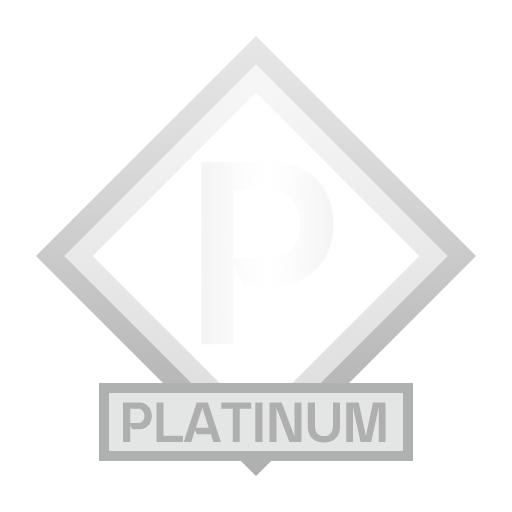
<style>
.page{position:relative;width:512px;height:512px;background:#ffffff}
.page>*{position:absolute;margin:0}
.t1{font:231.8px "yspotlight-regular";color:#f9f9f9}
.t2{font:50px "yspotlight-regular";color:#afafaf}
</style>
<div class="page">
<p class="t1" style="left:201px;top:162px;width:133px;height:183px">P</p>
<p class="t2" style="left:123px;top:402px;width:263px;height:41px">PLATINUM</p>
</div>
